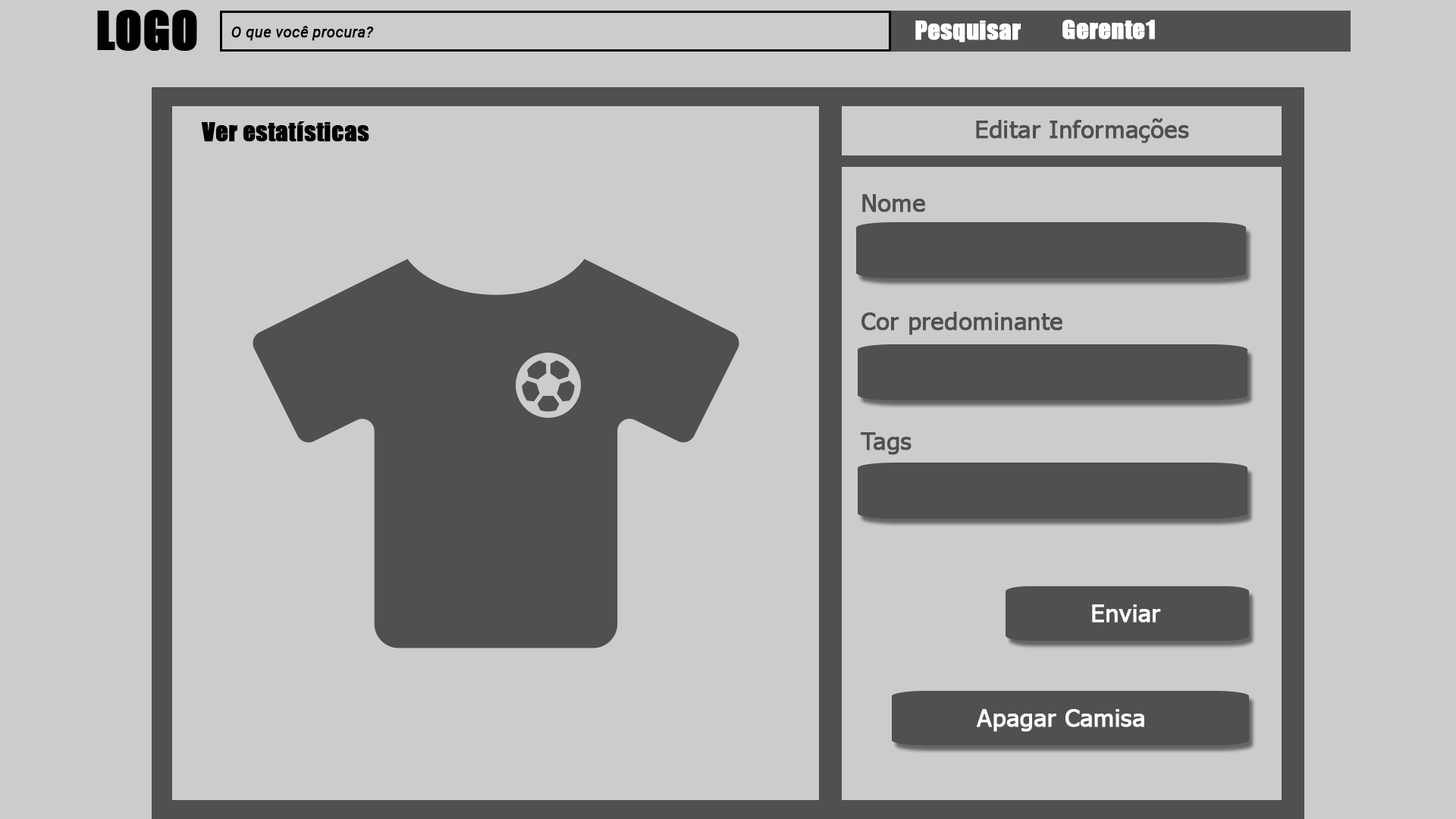
<style>
.page{position:relative;width:1456px;height:819px;background:#cccccc}
.page>*{position:absolute;margin:0}
.t1{font:15.2px "Roboto-Italic";color:#000000;font-weight:bold}
.t2{font:24.3px "Impact";color:#ffffff;font-weight:bold}
.t3{font:24.3px "Impact";color:#000000;font-weight:bold}
.t4{font:24.3px "Tahoma";color:#505050;font-weight:bold}
.t5{font:24.3px "Tahoma";color:#ffffff;font-weight:bold}
</style>
<div class="page">
<p class="t1" style="left:231px;top:26px;width:143px;height:15px">O que você procura?</p>
<p class="t2" style="left:915px;top:20px;width:106px;height:22px">Pesquisar</p>
<p class="t2" style="left:1062px;top:20px;width:93px;height:19px">Gerente1</p>
<p class="t3" style="left:201px;top:121px;width:168px;height:21px">Ver estatísticas</p>
<p class="t4" style="left:976px;top:118px;width:213px;height:25px">Editar Informações</p>
<p class="t4" style="left:862px;top:194px;width:63px;height:18px">Nome</p>
<p class="t4" style="left:861px;top:312px;width:201px;height:23px">Cor predominante</p>
<p class="t4" style="left:861px;top:432px;width:51px;height:23px">Tags</p>
<p class="t5" style="left:1092px;top:604px;width:69px;height:19px">Enviar</p>
<p class="t5" style="left:977px;top:709px;width:167px;height:23px">Apagar Camisa</p>
</div>
